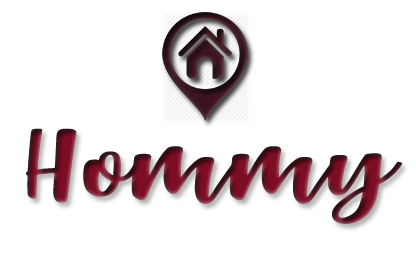
<style>
.page{position:relative;width:416px;height:254px;background:#ffffff}
.page>*{position:absolute;margin:0}
.t1{font:86.1px "Gabelisa";scale:1.51 1}
</style>
<div class="page">
<p class="t1" style="left:26px;top:128px;width:377px;height:96px">Hommy</p>
</div>
